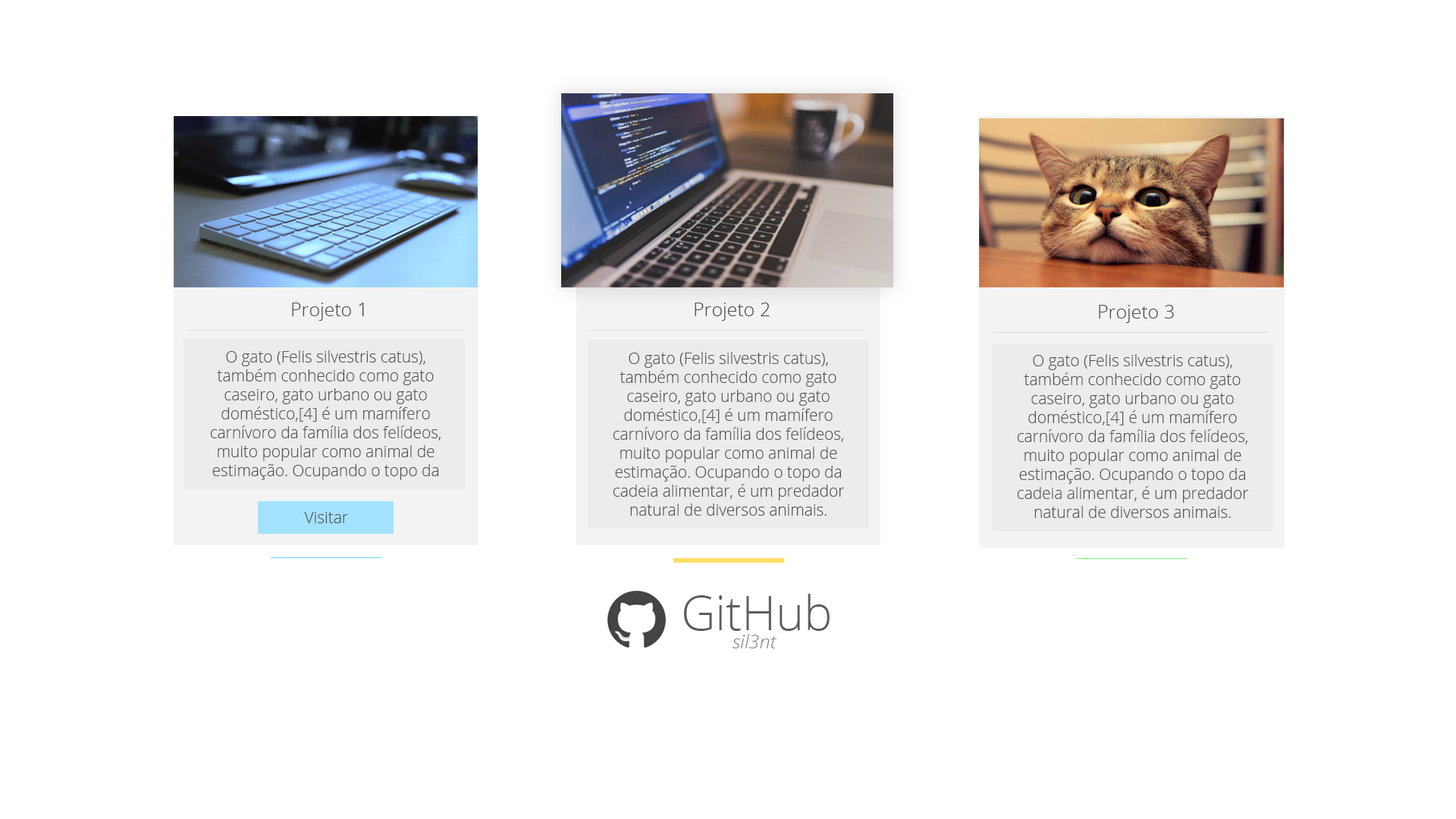
<style>
.page{position:relative;width:1456px;height:819px;background:#ffffff}
.page>*{position:absolute;margin:0}
.t1{font:19px "OpenSans-Light";color:#4e4e4e}
.t2{font:15.8px "OpenSans-Light";color:#535353}
.t3{font:47.4px "OpenSans-Light";color:#5e5d5d}
.t4{font:19px "OpenSans-LightItalic";color:#878787}
</style>
<div class="page">
<p class="t1" style="left:292px;top:303px;width:72px;height:18px">Projeto 1</p>
<p class="t1" style="left:695px;top:303px;width:75px;height:18px">Projeto 2</p>
<p class="t1" style="left:1099px;top:305px;width:75px;height:18px">Projeto 3</p>
<p class="t2" style="left:210px;top:350px;width:231px;height:130px;text-align:center">O gato (Felis silvestris catus), também conhecido como gato caseiro, gato urbano ou gato doméstico,[4] é um mamífero carnívoro da família dos felídeos, muito popular como animal de estimação. Ocupando o topo da cadeia alimentar, é um predador natural de diversos animais. roedores, pássaros, lagartixas e alguns insetos.</p>
<p class="t2" style="left:613px;top:352px;width:232px;height:164px;text-align:center">O gato (Felis silvestris catus), também conhecido como gato caseiro, gato urbano ou gato doméstico,[4] é um mamífero carnívoro da família dos felídeos, muito popular como animal de estimação. Ocupando o topo da cadeia alimentar, é um predador natural de diversos animais. roedores, pássaros, lagartixas e alguns insetos.</p>
<p class="t2" style="left:1017px;top:354px;width:232px;height:164px;text-align:center">O gato (Felis silvestris catus), também conhecido como gato caseiro, gato urbano ou gato doméstico,[4] é um mamífero carnívoro da família dos felídeos, muito popular como animal de estimação. Ocupando o topo da cadeia alimentar, é um predador natural de diversos animais. roedores, pássaros, lagartixas e alguns insetos.</p>
<p class="t2" style="left:304px;top:512px;width:44px;height:11px">Visitar</p>
<p class="t3" style="left:684px;top:594px;width:146px;height:37px">GitHub</p>
<p class="t4" style="left:733px;top:634px;width:44px;height:14px">sil3nt</p>
</div>
